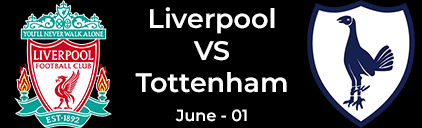
<style>
.page{position:relative;width:422px;height:128px;background:#000000}
.page>*{position:absolute;margin:0}
.t1{font:26.9px "Montserrat-SemiBold";color:#ffffff}
.t2{font:16px "Montserrat-SemiBold";color:#ffffff}
</style>
<div class="page">
<p class="t1" style="left:135px;top:7px;width:152px;height:86px;text-align:center">Liverpool<br>VS<br>Tottenham</p>
<p class="t2" style="left:175px;top:109px;width:72px;height:13px">June - 01</p>
</div>
